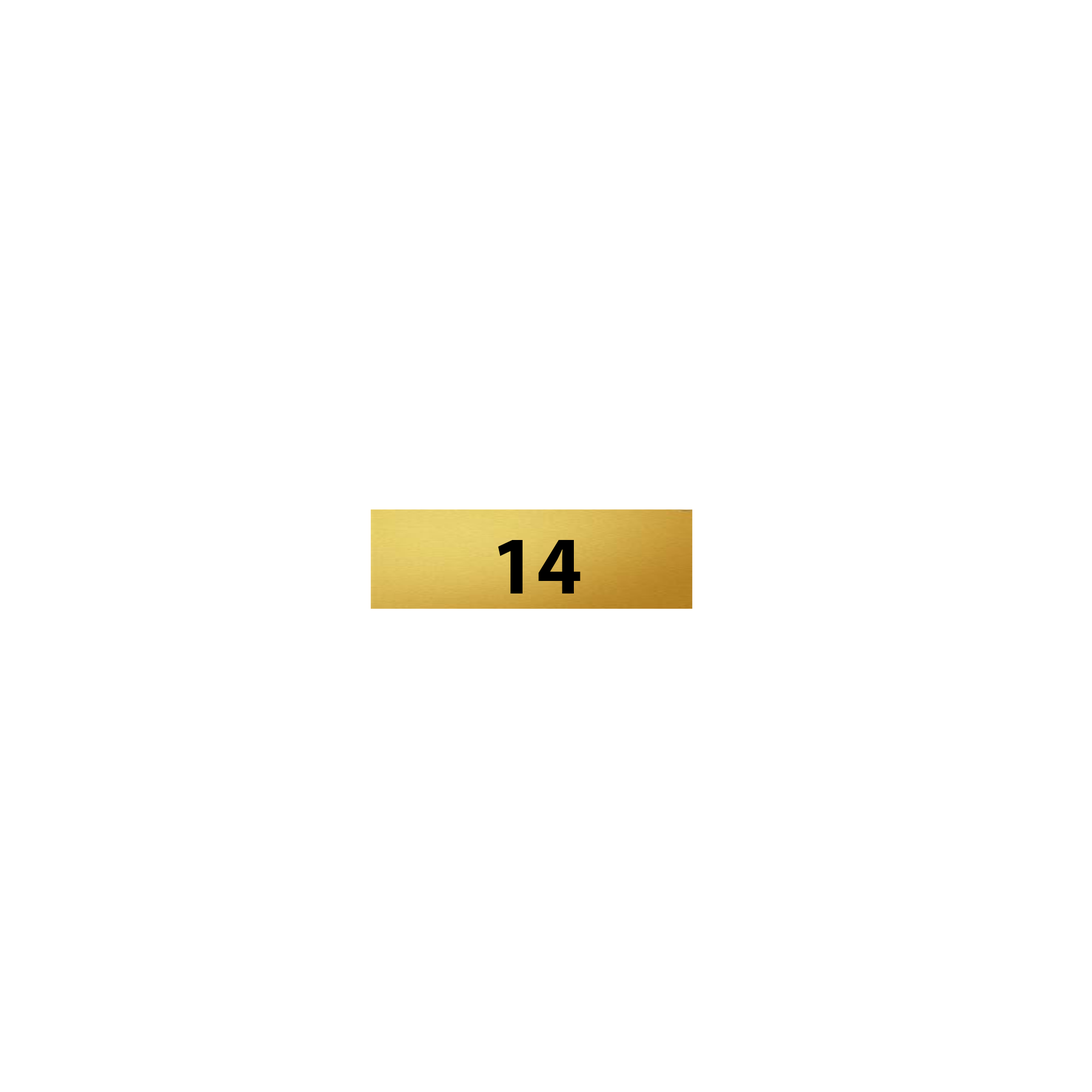
<style>
.page{position:relative;width:1092px;height:1092px;background:#ffffff}
.page>*{position:absolute;margin:0}
.t1{font:81.9px "MyriadPro-Bold";color:#000000}
</style>
<div class="page">
<p class="t1" style="left:498px;top:539px;width:82px;height:54px">14</p>
</div>
